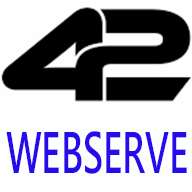
<style>
.page{position:relative;width:192px;height:192px;background:#fefefe}
.page>*{position:absolute;margin:0}
.t1{font:54.2px "MicrosoftJhengHeiUIBold";color:#260ceb;scale:0.64 1}
</style>
<div class="page">
<p class="t1" style="left:6px;top:131px;width:181px;height:43px">WEBSERVE</p>
</div>
